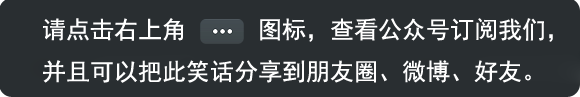
<style>
.page{position:relative;width:580px;height:97px;background:#292e31}
.page>*{position:absolute;margin:0}
.t1{font:24px/42px "SimHei";color:#ffffff}
</style>
<div class="page">
<p class="t1" style="left:43px;top:18px;width:510px;height:65px">请点击右上角      图标，查看公众号订阅我们，<br>并且可以把此笑话分享到朋友圈、微博、好友。</p>
</div>
